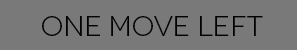
<style>
.page{position:relative;width:297px;height:50px;background:#797979}
.page>*{position:absolute;margin:0}
.t1{font:28px "Novecentowide-Book";color:#010101}
</style>
<div class="page">
<p class="t1" style="left:42px;top:16px;width:221px;height:20px">one Move Left</p>
</div>
